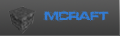
<style>
.page{position:relative;width:120px;height:36px}
.page>*{position:absolute;margin:0}
.t1{font:12px "Defused-ExtendedBold";color:#327cd5}
</style>
<div class="page">
<p class="t1" style="left:43px;top:10px;width:66px;height:12px">MCRAFT</p>
</div>
